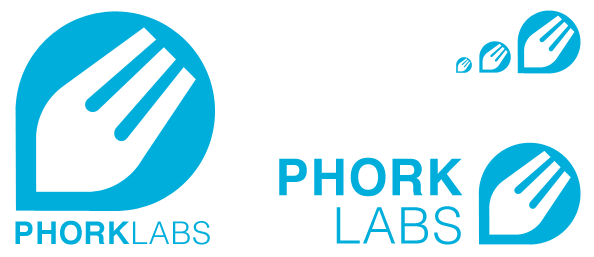
<style>
.page{position:relative;width:594px;height:257px;background:#ffffff}
.page>*{position:absolute;margin:0}
.t1{font:50.5px/48.1px "Helvetica-Bold";letter-spacing:0.025em;color:#00aedb}
.t2{font:50.5px/48.1px "Helvetica-Light";letter-spacing:0.025em;color:#00aedb}
.t3{font:31.4px "Helvetica-Bold";letter-spacing:0.025em;color:#00aedb}
.t4{font:31.4px "Helvetica-Light";letter-spacing:0.025em;color:#00aedb}
</style>
<div class="page">
<p class="t1" style="left:279px;top:157px;width:184px;height:88px;text-align:right">PHORK<br><span class="t2">LABS</span></p>
<p class="t3" style="left:15px;top:220px;width:195px;height:25px">PHORK<span class="t4">LABS</span></p>
</div>
